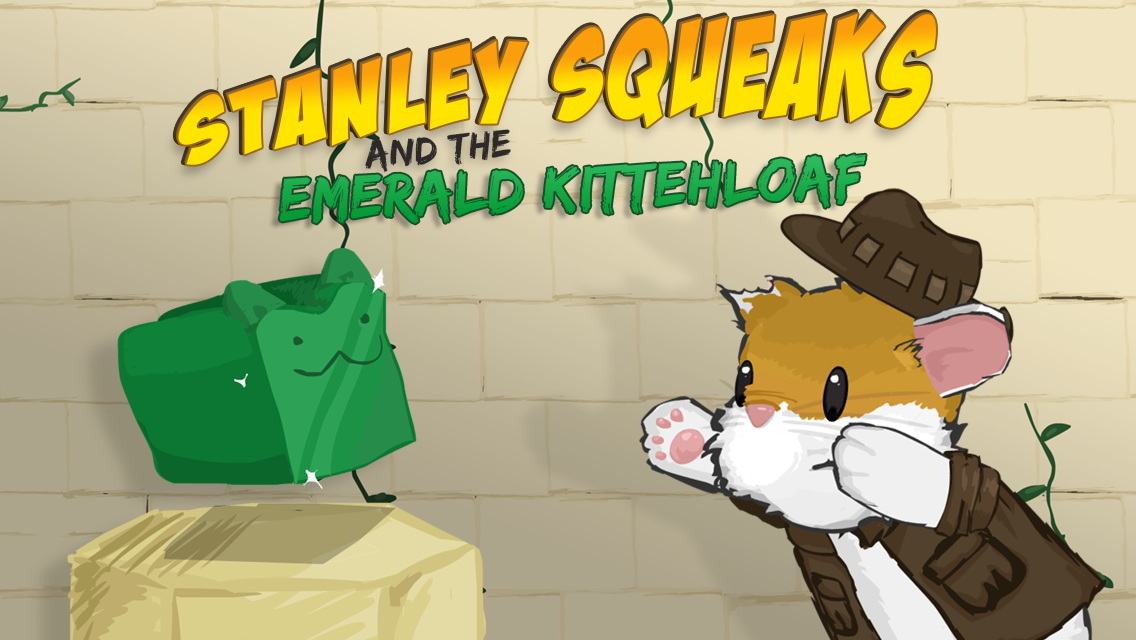
<style>
.page{position:relative;width:1136px;height:640px}
.page>*{position:absolute;margin:0}
.t1{font:119.3px "BadaBoomBB";letter-spacing:0.06em;scale:0.91 1}
.t2{font:40px "EdoSZ";letter-spacing:0.02em;color:#383434}
.t3{font:63.4px "EdoSZ";letter-spacing:0.02em;color:#17aa48}
</style>
<div class="page">
<p class="t1" style="left:175px;top:11px;width:759px;height:152px;rotate:-5deg">STANLEY SQUEAKS</p>
<p class="t1" style="left:178px;top:13px;width:758px;height:152px;rotate:-5deg">STANLEY SQUEAKS</p>
<p class="t2" style="left:365px;top:129px;width:146px;height:44px;rotate:-5deg">and the</p>
<p class="t3" style="left:279px;top:154px;width:587px;height:70px;rotate:-2deg">Emerald Kittehloaf</p>
</div>
